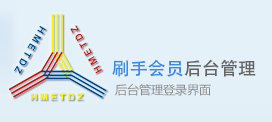
<style>
.page{position:relative;width:272px;height:122px;background:#e4f1f9}
.page>*{position:absolute;margin:0}
.t1{font:18px "AdobeHeitiStd-Regular";color:#3a8be3}
.t2{font:18px "AdobeHeitiStd-Regular";color:#656566}
.t3{font:12px "MicrosoftYaHei";color:#8b8b8b}
</style>
<div class="page">
<p class="t1" style="left:112px;top:59px;width:144px;height:18px">刷手会员<span class="t2">后台管理</span></p>
<p class="t3" style="left:115px;top:83px;width:96px;height:13px">后台管理登录界面</p>
</div>
